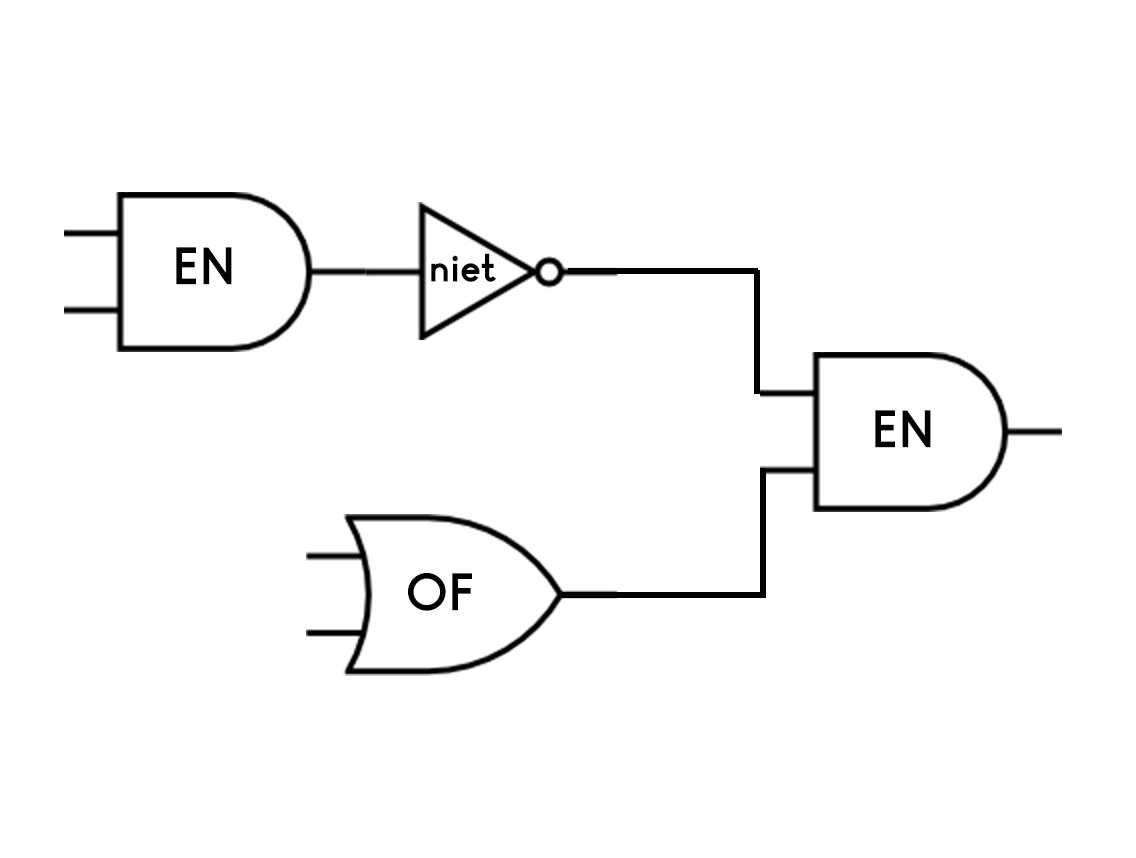
<style>
.page{position:relative;width:1136px;height:858px;background:#ffffff}
.page>*{position:absolute;margin:0}
.t1{font:49.8px "LeonSans-Bold";color:#000000}
.t2{font:37.4px "LeonSans-Bold";color:#000000}
</style>
<div class="page">
<p class="t1" style="left:176px;top:247px;width:56px;height:38px">EN</p>
<p class="t2" style="left:431px;top:253px;width:65px;height:29px">niet</p>
<p class="t1" style="left:875px;top:410px;width:56px;height:38px">EN</p>
<p class="t1" style="left:408px;top:573px;width:64px;height:38px">OF</p>
</div>
